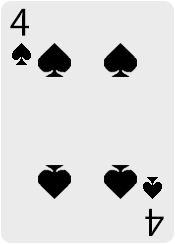
<style>
.page{position:relative;width:175px;height:244px;background:#ebebeb}
.page>*{position:absolute;margin:0}
.t1{font:36px "KozGoPr6N-Regular";color:#000000}
</style>
<div class="page">
<p class="t1" style="left:10px;top:8px;width:19px;height:28px">4</p>
<p class="t1" style="left:145px;top:208px;width:19px;height:28px;rotate:-180deg">4</p>
</div>
